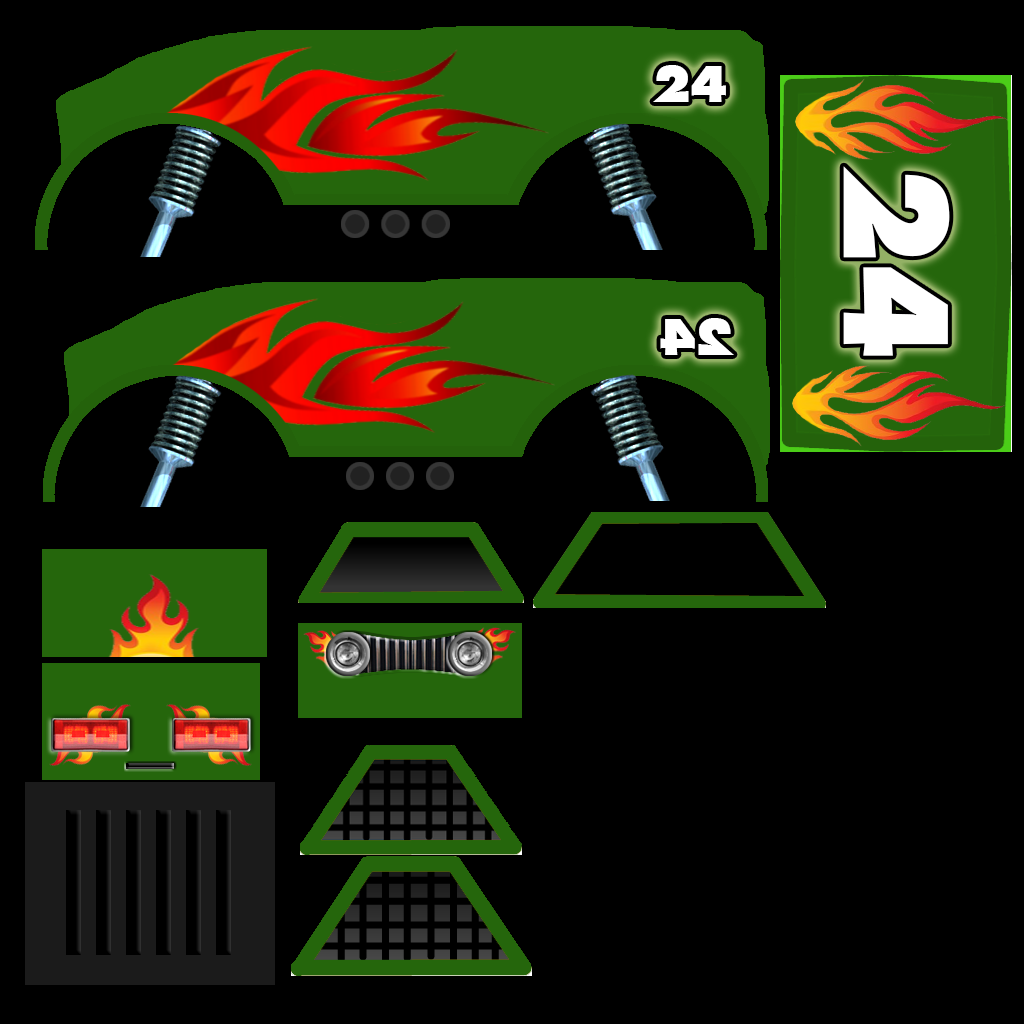
<style>
.page{position:relative;width:1024px;height:1024px;background:#000000}
.page>*{position:absolute;margin:0}
.t1{font:48px "Thehits";color:#ffffff;font-variant:small-caps}
.t2{font:140.5px "Thehits";color:#ffffff;font-variant:small-caps;scale:0.88 1}
</style>
<div class="page">
<p class="t1" style="left:653px;top:65px;width:73px;height:37px">24</p>
<p class="t2" style="left:843px;top:166px;width:107px;height:190px;rotate:90deg">24</p>
<p class="t1" style="left:660px;top:318px;width:74px;height:37px;rotate:180deg">24</p>
</div>
